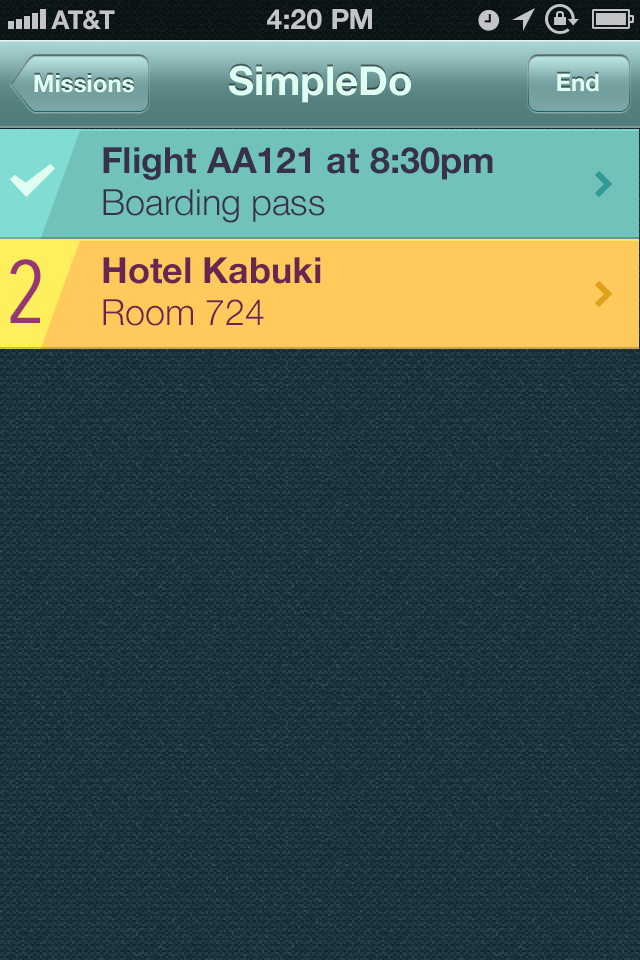
<style>
.page{position:relative;width:640px;height:960px}
.page>*{position:absolute;margin:0}
.t1{font:26px "HelveticaNeue-Bold";color:#c2c5c5}
.t2{font:28px "HelveticaNeue-Bold";color:#c2c4c5;text-transform:uppercase}
.t3{font:40px "HelveticaNeue-Bold";color:#defff2}
.t4{font:24px "HelveticaNeue-Bold";color:#defff2}
.t5{font:36px/42px "HelveticaNeue-Bold";color:#37324a}
.t6{font:36px/42px "HelveticaNeue-Light";color:#37324a}
.t7{font:36px/42px "HelveticaNeue-Bold";color:#692650}
.t8{font:36px/42px "HelveticaNeue-Light";color:#692650}
.t9{font:88.5px "AvenirNextCondensed-Regular";color:#963673}
</style>
<div class="page">
<p class="t1" style="left:51px;top:10px;width:64px;height:20px">AT&amp;T</p>
<p class="t2" style="left:267px;top:9px;width:105px;height:21px">4:20 PM</p>
<p class="t3" style="left:229px;top:65px;width:182px;height:38px">SimpleDo</p>
<p class="t4" style="left:34px;top:74px;width:100px;height:19px">Missions</p>
<p class="t4" style="left:557px;top:73px;width:42px;height:19px">End</p>
<p class="t5" style="left:103px;top:147px;width:390px;height:75px">Flight AA121 at 8:30pm<br><span class="t6">Boarding pass</span></p>
<p class="t5" style="left:103px;top:147px;width:390px;height:76px">Flight AA121 at 8:30pm<br><span class="t6">Boarding pass</span></p>
<p class="t7" style="left:103px;top:257px;width:218px;height:69px">Hotel Kabuki<br><span class="t8">Room 724</span></p>
<p class="t9" style="left:10px;top:259px;width:31px;height:64px">2</p>
</div>
